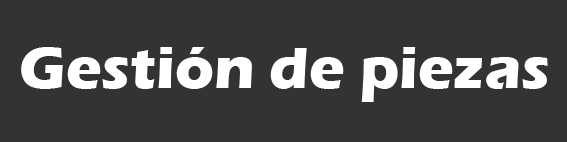
<style>
.page{position:relative;width:567px;height:142px;background:#333333}
.page>*{position:absolute;margin:0}
.t1{font:60px "ErasITC-Bold";color:#ffffff}
</style>
<div class="page">
<p class="t1" style="left:21px;top:47px;width:527px;height:55px">Gestión de piezas</p>
</div>
